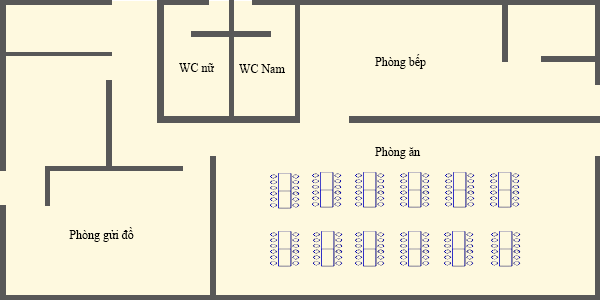
<style>
.page{position:relative;width:600px;height:300px;background:#fef9df}
.page>*{position:absolute;margin:0}
.t1{font:12px "TimesNewRomanPSMT";color:#000000}
</style>
<div class="page">
<p class="t1" style="left:375px;top:54px;width:51px;height:15px">Phòng bếp</p>
<p class="t1" style="left:179px;top:63px;width:36px;height:9px">WC nữ</p>
<p class="t1" style="left:239px;top:64px;width:46px;height:9px">WC Nam</p>
<p class="t1" style="left:375px;top:147px;width:46px;height:12px">Phòng ăn</p>
<p class="t1" style="left:69px;top:227px;width:65px;height:15px">Phòng gửi đồ</p>
</div>
